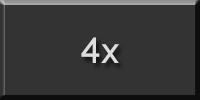
<style>
.page{position:relative;width:200px;height:100px;background:#333333}
.page>*{position:absolute;margin:0}
.t1{font:36px "ArialMT";color:#dddddd}
</style>
<div class="page">
<p class="t1" style="left:81px;top:37px;width:38px;height:26px">4x</p>
</div>
